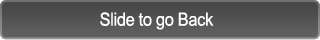
<style>
.page{position:relative;width:320px;height:40px}
.page>*{position:absolute;margin:0}
.t1{font:18.2px "ArialUnicodeMS";letter-spacing:-0.02em;color:#ffffff;scale:0.9 1}
</style>
<div class="page">
<p class="t1" style="left:100px;top:12px;width:114px;height:18px">Slide to go Back</p>
</div>
